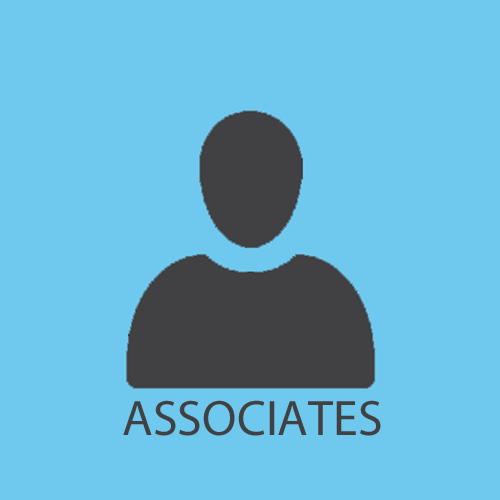
<style>
.page{position:relative;width:500px;height:500px;background:#6fc8ee}
.page>*{position:absolute;margin:0}
.t1{font:50px "MyriadPro-Regular";color:#414042}
</style>
<div class="page">
<p class="t1" style="left:123px;top:400px;width:258px;height:36px">ASSOCIATES</p>
</div>
